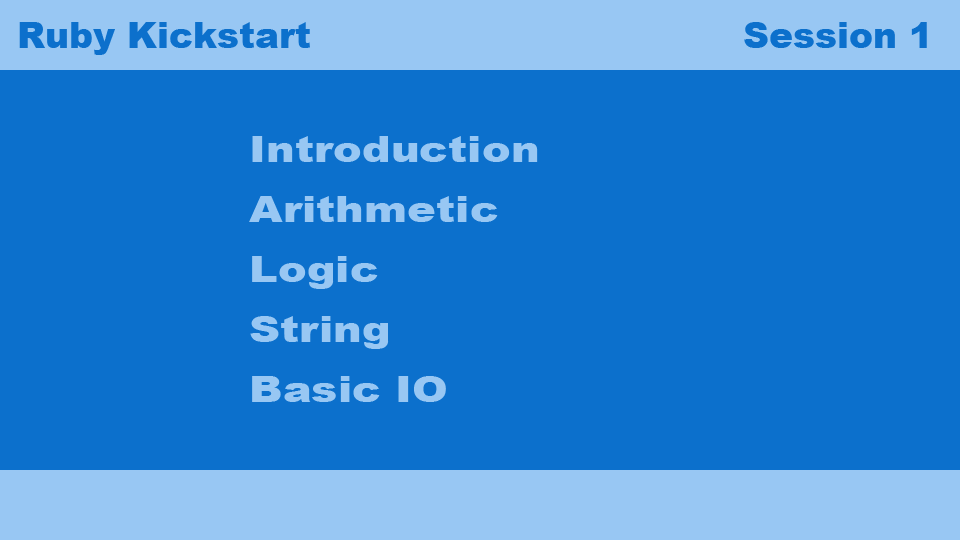
<style>
.page{position:relative;width:960px;height:540px;background:#0c70cc}
.page>*{position:absolute;margin:0}
.t1{font:36px "Arial-Black";color:#0c70cc}
.t2{font:36px/60px "Arial-Black";color:#98c7f3;scale:1.2 1}
</style>
<div class="page">
<p class="t1" style="left:19px;top:22px;width:908px;height:33px">Ruby Kickstart                                    Session 1</p>
<p class="t2" style="left:249px;top:136px;width:289px;height:266px">Introduction<br>Arithmetic<br>Logic<br>String<br>Basic IO</p>
</div>
